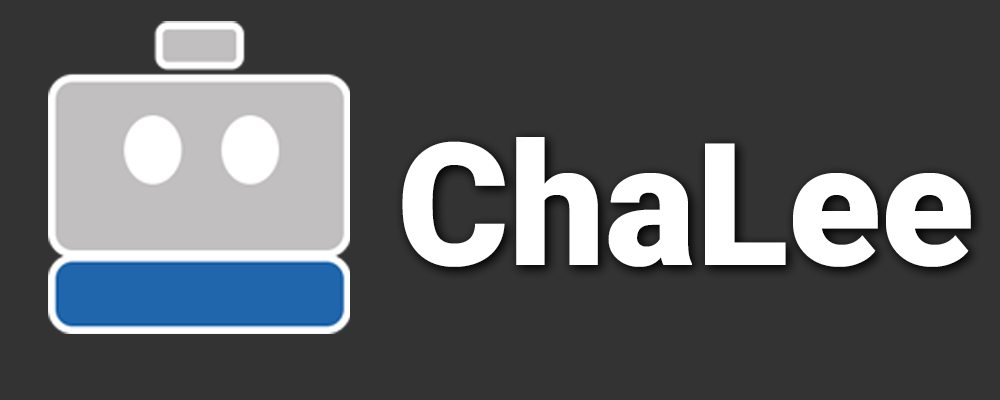
<style>
.page{position:relative;width:1000px;height:400px;background:#333333}
.page>*{position:absolute;margin:0}
.t1{font:170.8px "Roboto-Black";color:#ffffff}
</style>
<div class="page">
<p class="t1" style="left:402px;top:137px;width:569px;height:130px">ChaLee</p>
</div>
